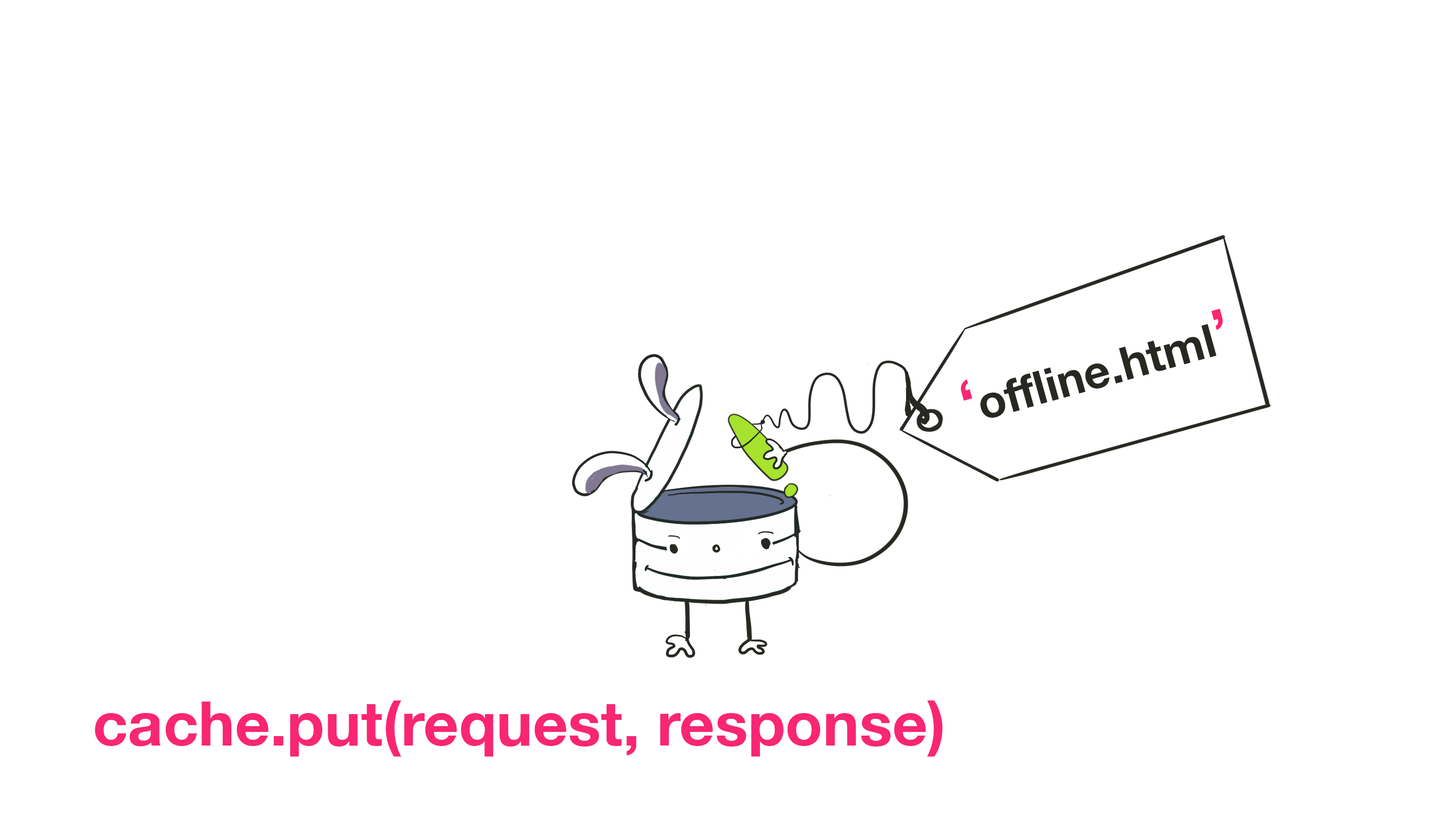
<style>
.page{position:relative;width:1430px;height:834px;background:#ffffff}
.page>*{position:absolute;margin:0}
.t1{font:46.1px "HelveticaNeue-Bold";color:#272822}
.t2{font:61.4px "HelveticaNeue-Bold";color:#f92672}
</style>
<div class="page">
<p class="t1" style="left:961px;top:308px;width:262px;height:110px;rotate:-16deg"><span class="t2">‘</span>offline.html<span class="t2">’</span></p>
<p class="t2" style="left:95px;top:700px;width:848px;height:56px">cache.put(request, response)</p>
</div>
